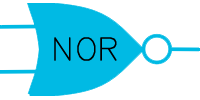
<style>
.page{position:relative;width:200px;height:100px;background:#ffffff}
.page>*{position:absolute;margin:0}
.t1{font:30px "SWSimp";color:#000000}
</style>
<div class="page">
<p class="t1" style="left:54px;top:37px;width:63px;height:24px">NOR</p>
</div>
